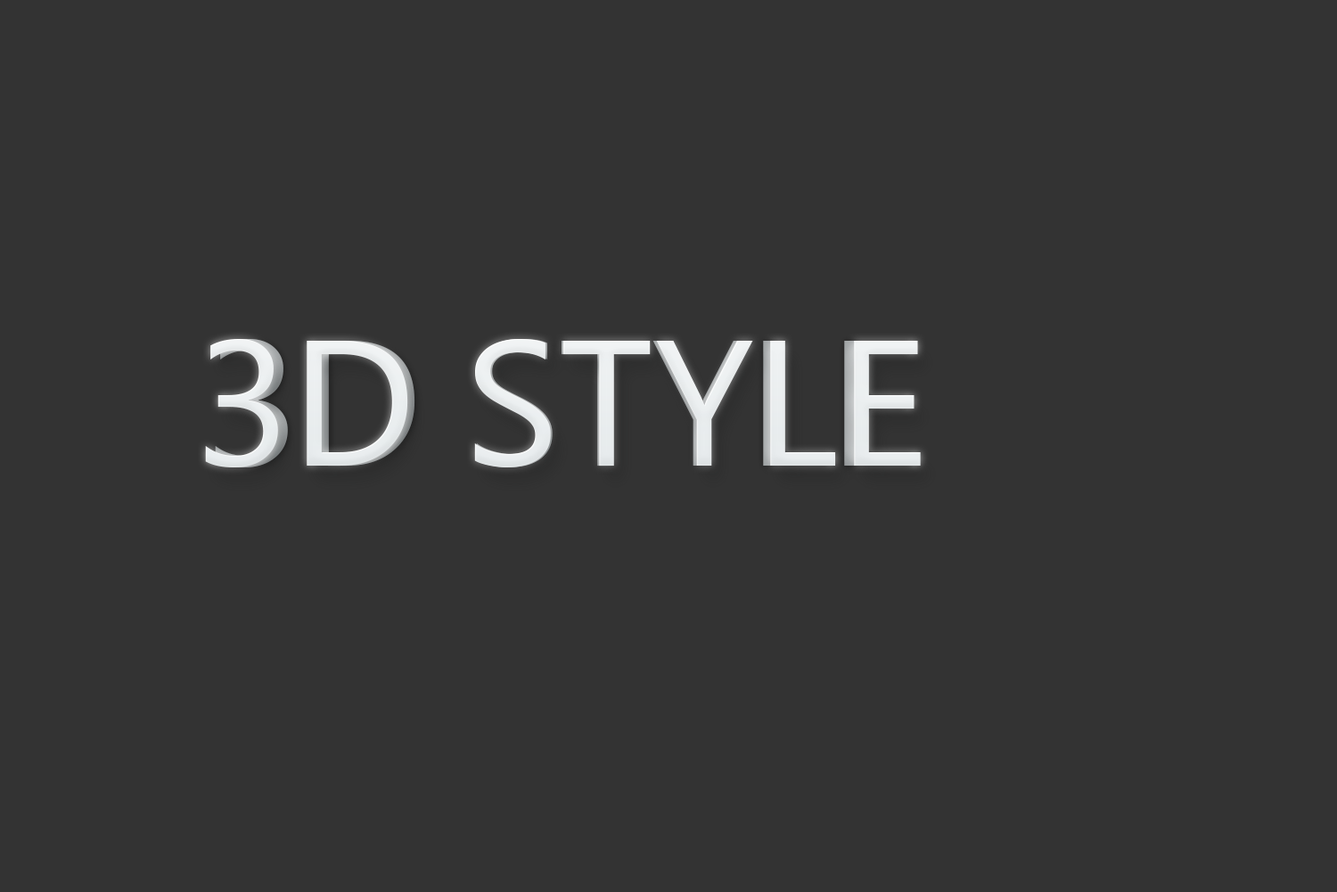
<style>
.page{position:relative;width:1337px;height:892px;background:#333333}
.page>*{position:absolute;margin:0}
.t1{font:178.3px "SegoeUISymbol";color:#eff2f3;text-transform:uppercase}
.t2{font:178.3px "SegoeUISymbol";letter-spacing:-0.015em;color:#e8eced;text-transform:uppercase}
</style>
<div class="page">
<p class="t1" style="left:205px;top:339px;width:716px;height:128px">3d style</p>
<p class="t2" style="left:215px;top:339px;width:696px;height:128px">3d style</p>
</div>
